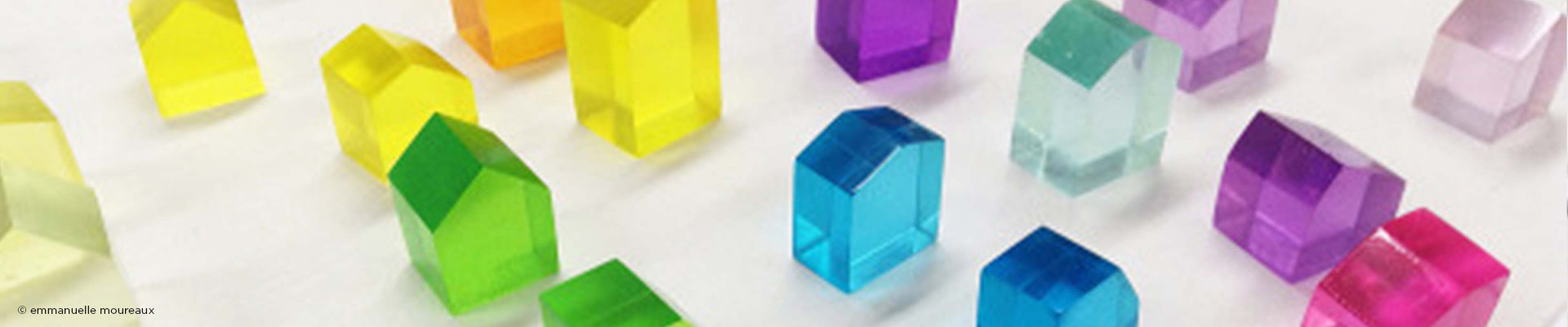
<style>
.page{position:relative;width:1568px;height:327px}
.page>*{position:absolute;margin:0}
.t1{font:11px "Gotham-Book";color:#1a1a1a}
</style>
<div class="page">
<p class="t1" style="left:18px;top:305px;width:136px;height:9px">© emmanuelle moureaux</p>
</div>
